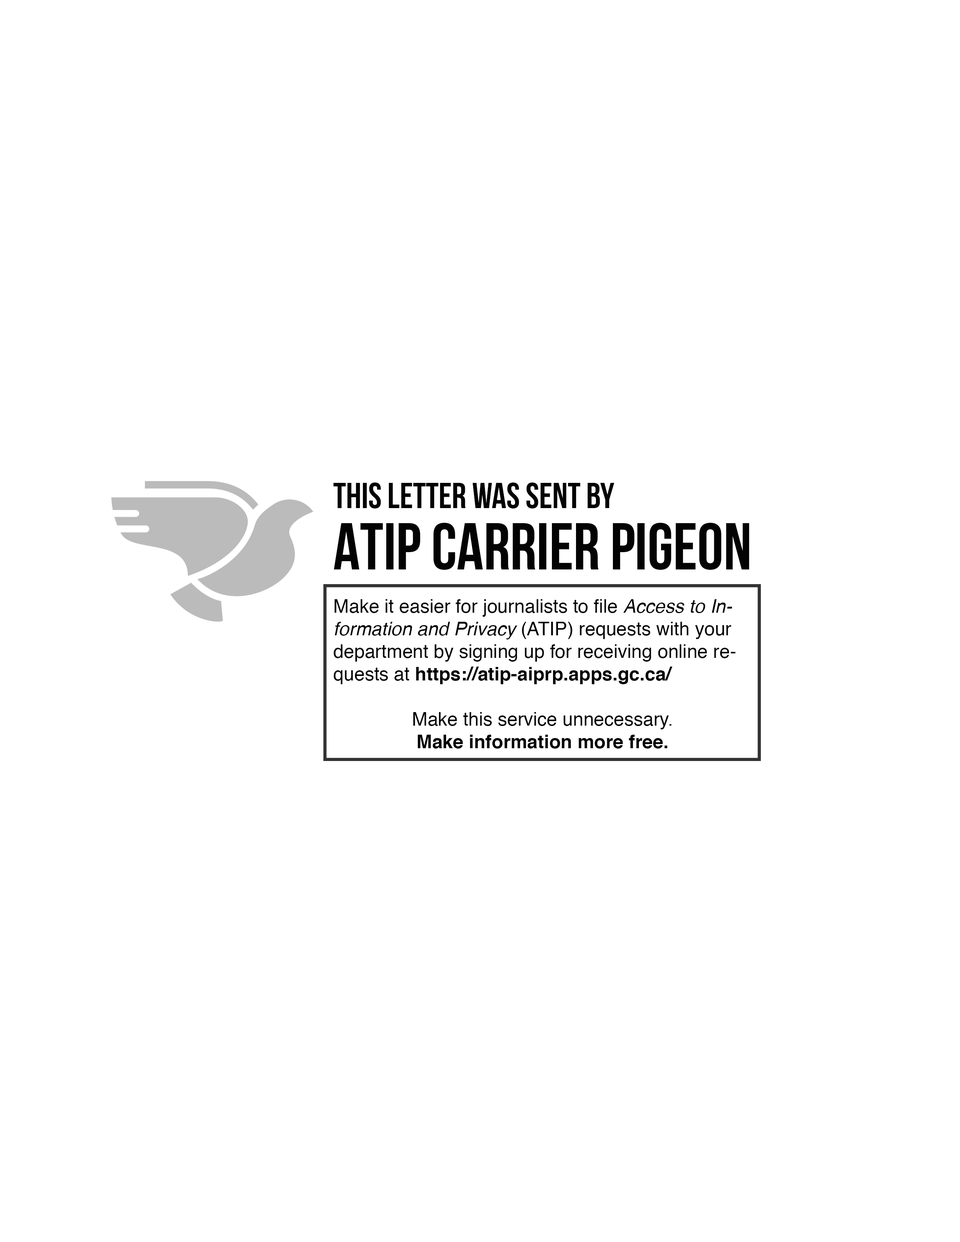
<style>
.page{position:relative;width:960px;height:1242px;background:#ffffff}
.page>*{position:absolute;margin:0}
.t1{font:36.1px/61.2px "BebasNeueBold";color:#030303}
.t2{font:65.9px/61.2px "BebasNeueBold";color:#030303}
.t3{font:18.8px "Helvetica";color:#030303}
.t4{font:18.8px "Helvetica-Oblique";color:#030303}
.t5{font:18.8px "Helvetica-Bold";color:#030303}
</style>
<div class="page">
<p class="t1" style="left:333px;top:483px;width:416px;height:87px">This letter was sent by<br><span class="t2">ATIP carrier pigeon</span></p>
<p class="t3" style="left:334px;top:599px;width:402px;height:150px">Make it easier for journalists to file <span class="t4">Access to Information and Privacy</span> (ATIP) requests with your department by signing up for receiving online requests at <span class="t5">https://atip-aiprp.apps.gc.ca/<br></span><br>Make this service unnecessary.<br><span class="t5">Make information more free.</span></p>
</div>
